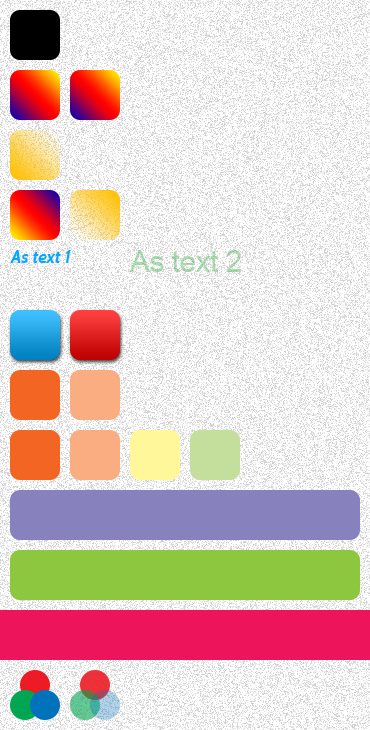
<style>
.page{position:relative;width:370px;height:730px;background:#ffffff}
.page>*{position:absolute;margin:0}
.t1{font:18px "Cabin-BoldItalic";letter-spacing:-0.02em;color:#00aaff}
.t2{font:30px "ArialMT";letter-spacing:-0.02em;color:#aedcb3}
</style>
<div class="page">
<p class="t1" style="left:10px;top:250px;width:61px;height:13px">As text 1</p>
<p class="t2" style="left:129px;top:250px;width:112px;height:22px">As text 2</p>
</div>
